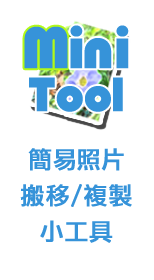
<style>
.page{position:relative;width:154px;height:280px;background:#ffffff}
.page>*{position:absolute;margin:0}
.t1{font:60px "Bauhaus93";letter-spacing:0.075em;color:#3693d9;font-weight:bold}
.t2{font:50px "Bauhaus93";letter-spacing:0.01em;color:#3693d9;font-weight:bold}
.t3{font:24px/36px "LiHeiPro";letter-spacing:0.075em;color:#3693d9;font-weight:bold}
</style>
<div class="page">
<p class="t1" style="left:24px;top:26px;width:44px;height:43px">M</p>
<p class="t1" style="left:70px;top:25px;width:13px;height:44px">i</p>
<p class="t1" style="left:116px;top:25px;width:13px;height:44px">i</p>
<p class="t1" style="left:84px;top:38px;width:28px;height:31px">n</p>
<p class="t2" style="left:29px;top:77px;width:94px;height:35px">Tool</p>
<p class="t3" style="left:20px;top:148px;width:112px;height:95px;text-align:center">簡易照片<br>搬移/複製<br>小工具</p>
</div>
